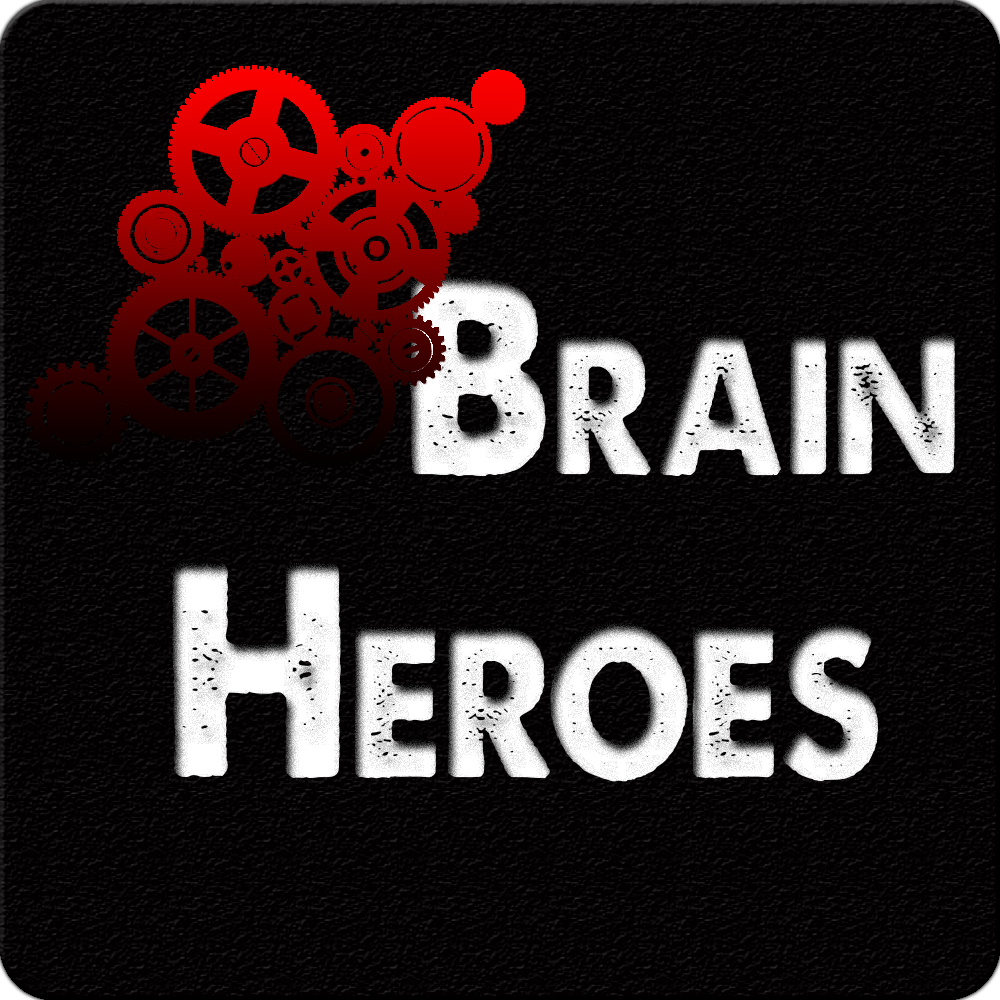
<style>
.page{position:relative;width:1000px;height:1000px;background:#020000}
.page>*{position:absolute;margin:0}
.t1{font:267px "ALoveofThunder";letter-spacing:-0.02em;font-variant:small-caps;scale:0.85 1}
.t2{font:288.1px "ALoveofThunder";letter-spacing:-0.02em;color:#ffffff;font-variant:small-caps;scale:0.85 1}
</style>
<div class="page">
<p class="t1" style="left:409px;top:276px;width:546px;height:200px">Brain</p>
<p class="t2" style="left:172px;top:562px;width:707px;height:220px">Heroes</p>
</div>
